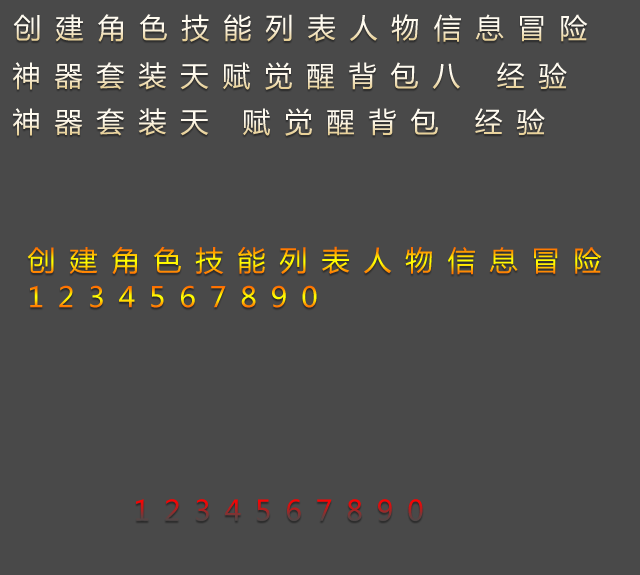
<style>
.page{position:relative;width:640px;height:575px;background:#494949}
.page>*{position:absolute;margin:0}
.t1{font:28px "MicrosoftYaHei";letter-spacing:0.5em}
</style>
<div class="page">
<p class="t1" style="left:13px;top:14px;width:575px;height:28px">创建角色技能列表人物信息冒险</p>
<p class="t1" style="left:13px;top:62px;width:554px;height:28px">神器套装天赋觉醒背包八 经验</p>
<p class="t1" style="left:13px;top:108px;width:532px;height:28px">神器套装天 赋觉醒背包 经验</p>
<p class="t1" style="left:27px;top:246px;width:575px;height:29px">创建角色技能列表人物信息冒险</p>
<p class="t1" style="left:30px;top:285px;width:287px;height:23px">1234567890</p>
<p class="t1" style="left:136px;top:499px;width:287px;height:22px">1234567890</p>
</div>
